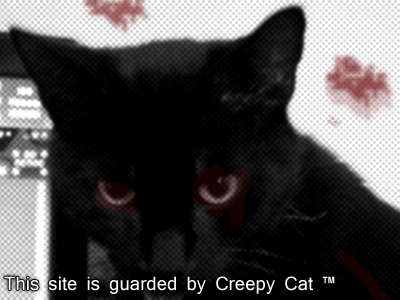
<style>
.page{position:relative;width:400px;height:300px;background:#000000}
.page>*{position:absolute;margin:0}
.t1{font:18px "Mangal";color:#ffffff}
</style>
<div class="page">
<p class="t1" style="left:4px;top:276px;width:331px;height:18px">This site is guarded by Creepy Cat ™</p>
</div>
